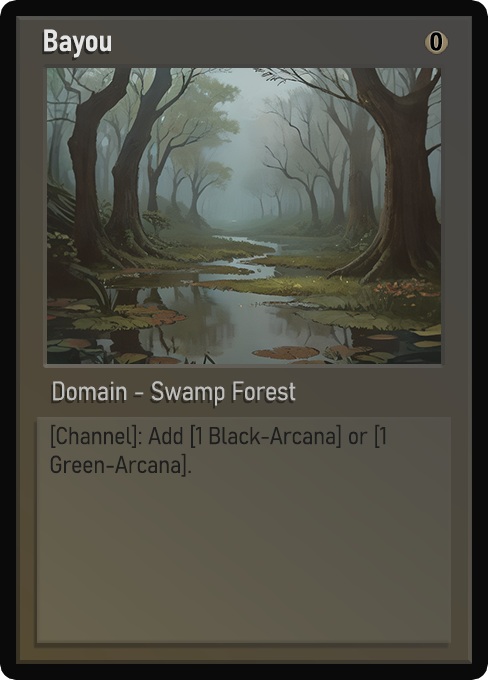
<style>
.page{position:relative;width:488px;height:680px}
.page>*{position:absolute;margin:0}
.t1{font:30px "Bahnschrift-SemiBoldSemiCondensed";color:#f2f2f2;font-weight:bold}
.t2{font:25px "WTRRoycroft";color:#000000;font-weight:bold;scale:1.09 1}
.t3{font:26px "Bahnschrift-LightSemiCondensed";color:#c8c8c8;font-weight:bold}
.t4{font:24px "Bahnschrift-LightSemiCondensed";color:#1e1e1e;font-weight:bold}
</style>
<div class="page">
<p class="t1" style="left:44px;top:29px;width:67px;height:29px;opacity:0.9">Bayou</p>
<p class="t2" style="left:430px;top:32px;width:12px;height:19px">0</p>
<p class="t3" style="left:53px;top:381px;width:243px;height:25px;opacity:0.9">Domain - Swamp Forest</p>
<p class="t4" style="left:50px;top:424px;width:336px;height:53px">[Channel]: Add [1 Black-Arcana] or [1 Green-Arcana].</p>
</div>
